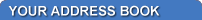
<style>
.page{position:relative;width:202px;height:20px;background:#4379c1}
.page>*{position:absolute;margin:0}
.t1{font:13.3px "Arial-BoldMT";color:#ffffff}
</style>
<div class="page">
<p class="t1" style="left:8px;top:5px;width:152px;height:11px">YOUR ADDRESS BOOK</p>
</div>
